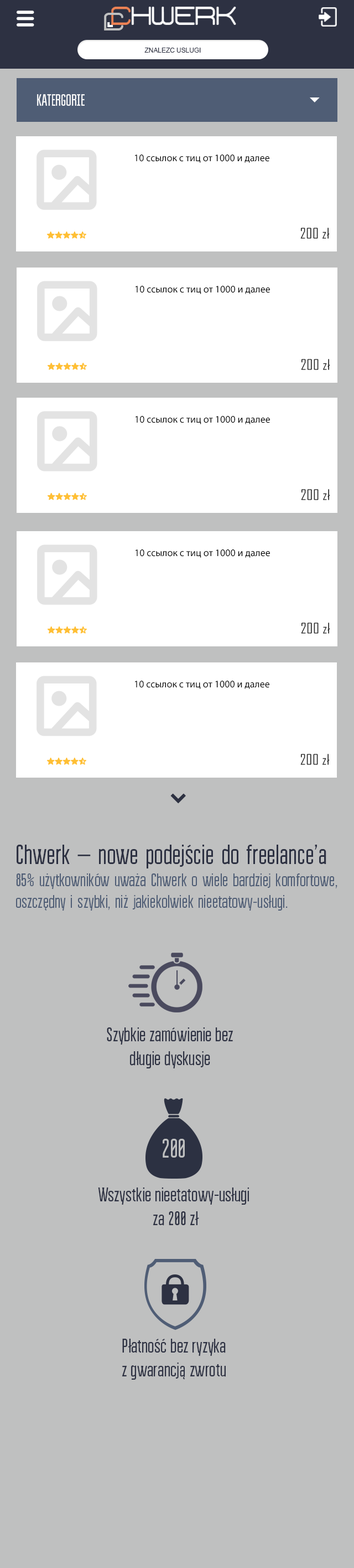
<style>
.page{position:relative;width:354px;height:1568px;background:#bfc0c0}
.page>*{position:absolute;margin:0}
.t1{font:23.7px "Phantomcyr-lat";color:#bfc0c0}
.t2{font:6.6px "ArialMT";letter-spacing:-0.005em;color:#2d3142;text-transform:uppercase}
.t3{font:16.6px "BravoRG";letter-spacing:-0.005em;color:#ffffff;text-transform:uppercase}
.t4{font:10px "MyriadPro-Regular";color:#000000}
.t5{font:14.1px "AgencyFB-Reg";letter-spacing:0.025em;color:#222222}
.t6{font:18.2px "BravoRG";color:#4f5d75}
.t7{font:27.3px "BravoRG";color:#2d3142}
.t8{font:19.9px "BravoRG";color:#2d3142}
</style>
<div class="page">
<p class="t1" style="left:104px;top:13px;width:20px;height:17px">C</p>
<p class="t2" style="left:145px;top:48px;width:56px;height:5px">znalezc uslugi</p>
<p class="t3" style="left:37px;top:94px;width:48px;height:12px">Katergorie</p>
<p class="t4" style="left:135px;top:155px;width:135px;height:8px">10 ссылок с тиц от 1000 и далее</p>
<p class="t5" style="left:301px;top:228px;width:29px;height:11px">200 zł</p>
<p class="t4" style="left:136px;top:286px;width:134px;height:8px">10 ссылок с тиц от 1000 и далее</p>
<p class="t5" style="left:301px;top:359px;width:30px;height:11px">200 zł</p>
<p class="t4" style="left:136px;top:416px;width:134px;height:8px">10 ссылок с тиц от 1000 и далее</p>
<p class="t5" style="left:301px;top:489px;width:30px;height:11px">200 zł</p>
<p class="t4" style="left:136px;top:549px;width:134px;height:9px">10 ссылок с тиц от 1000 и далее</p>
<p class="t5" style="left:301px;top:623px;width:30px;height:11px">200 zł</p>
<p class="t4" style="left:135px;top:681px;width:135px;height:8px">10 ссылок с тиц от 1000 и далее</p>
<p class="t5" style="left:301px;top:754px;width:29px;height:11px">200 zł</p>
<p class="t6" style="left:16px;top:845px;width:322px;height:66px"><span class="t7">Chwerk — nowe podejście do freelance’a<br></span>85% użytkowników uważa Chwerk o wiele bardziej komfortowe,<br>oszczędny i szybki, niż jakiekolwiek nieetatowy-usługi.</p>
<p class="t8" style="left:107px;top:1027px;width:127px;height:41px;text-align:center">Szybkie zamówienie bez<br>długie dyskusje</p>
<p class="t8" style="left:98px;top:1187px;width:151px;height:39px;text-align:center">Wszystkie nieetatowy-usługi <br>za 200 zł</p>
<p class="t8" style="left:122px;top:1339px;width:104px;height:41px;text-align:center">Płatność bez ryzyka<br>z gwarancją zwrotu</p>
</div>
